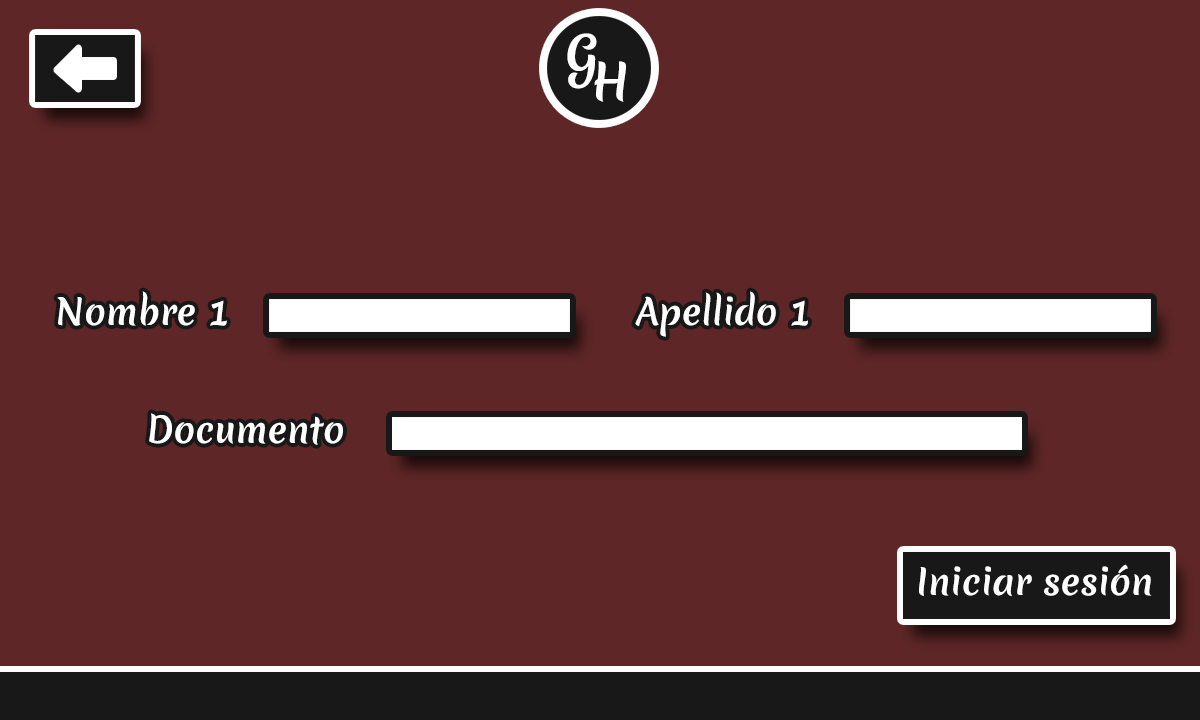
<style>
.page{position:relative;width:1200px;height:720px;background:#5e2626}
.page>*{position:absolute;margin:0}
.t1{font:48.4px "MeriendaOne-Regular";color:#ffffff}
.t2{font:35.1px "MeriendaOne-Regular";color:#ffffff}
</style>
<div class="page">
<p class="t1" style="left:567px;top:33px;width:30px;height:56px">G</p>
<p class="t1" style="left:594px;top:61px;width:32px;height:41px">H</p>
<p class="t2" style="left:57px;top:291px;width:170px;height:35px">Nombre 1</p>
<p class="t2" style="left:635px;top:291px;width:173px;height:46px">Apellido 1</p>
<p class="t2" style="left:149px;top:413px;width:194px;height:32px">Documento</p>
<p class="t2" style="left:919px;top:564px;width:233px;height:33px">Iniciar sesión</p>
</div>
